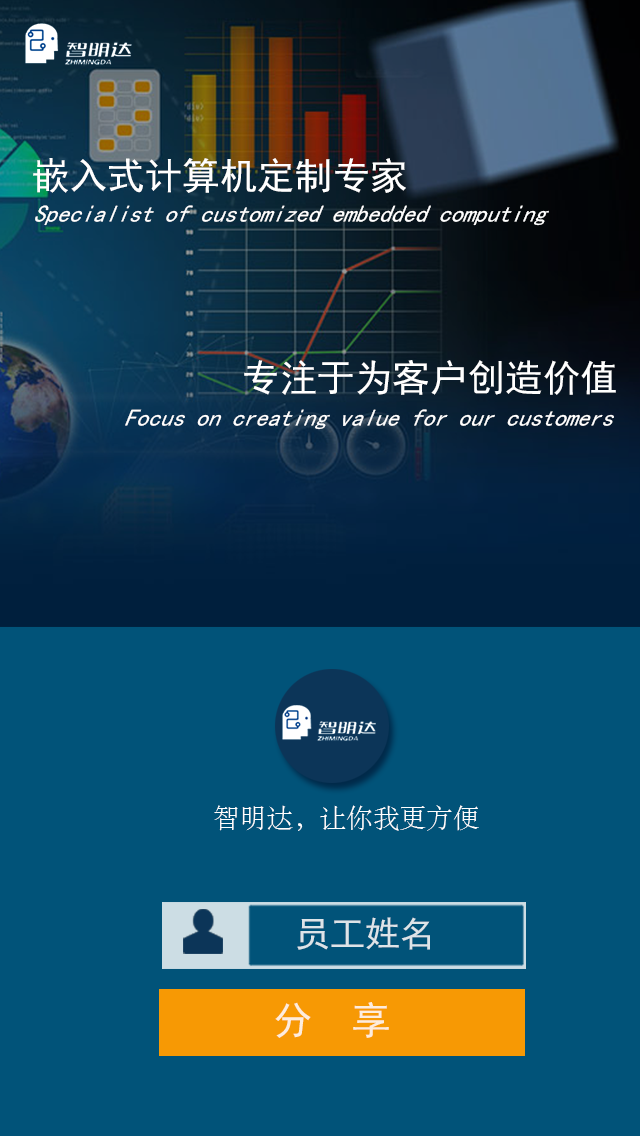
<style>
.page{position:relative;width:640px;height:1136px;background:#015379}
.page>*{position:absolute;margin:0}
.t1{font:37.5px "SimHei";color:#ffffff}
.t2{font:25.7px "SimHei";color:#ffffff;scale:0.93 1}
.t3{font:26.9px "STSong";color:#ffffff}
.t4{font:34.7px "SimHei";color:#dde4e8}
.t5{font:38.9px "SimHei";color:#fdeddd}
</style>
<div class="page">
<p class="t1" style="left:33px;top:158px;width:373px;height:35px">嵌入式计算机定制专家</p>
<p class="t2" style="left:35px;top:205px;width:514px;height:21px">Specialist of customized embedded computing</p>
<p class="t1" style="left:244px;top:360px;width:372px;height:35px">专注于为客户创造价值</p>
<p class="t2" style="left:125px;top:409px;width:489px;height:21px">Focus on creating value for our customers</p>
<p class="t3" style="left:214px;top:805px;width:265px;height:26px">智明达，让你我更方便</p>
<p class="t4" style="left:297px;top:917px;width:133px;height:33px">员工姓名</p>
<p class="t5" style="left:275px;top:1002px;width:114px;height:36px">分  享</p>
</div>
